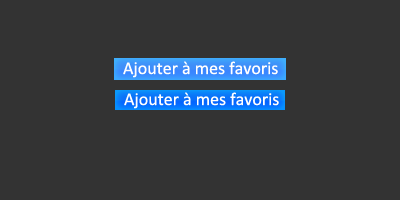
<style>
.page{position:relative;width:400px;height:200px;background:#333333}
.page>*{position:absolute;margin:0}
.t1{font:18px "Calibri";color:#ffffff}
</style>
<div class="page">
<p class="t1" style="left:123px;top:61px;width:155px;height:17px">Ajouter à mes favoris</p>
<p class="t1" style="left:124px;top:92px;width:155px;height:17px">Ajouter à mes favoris</p>
</div>
